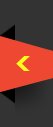
<style>
.page{position:relative;width:53px;height:127px;background:#333333}
.page>*{position:absolute;margin:0}
.t1{font:40px "Cabin-Bold";color:#fffc1e}
</style>
<div class="page">
<p class="t1" style="left:16px;top:55px;width:15px;height:17px">&lt;</p>
</div>
